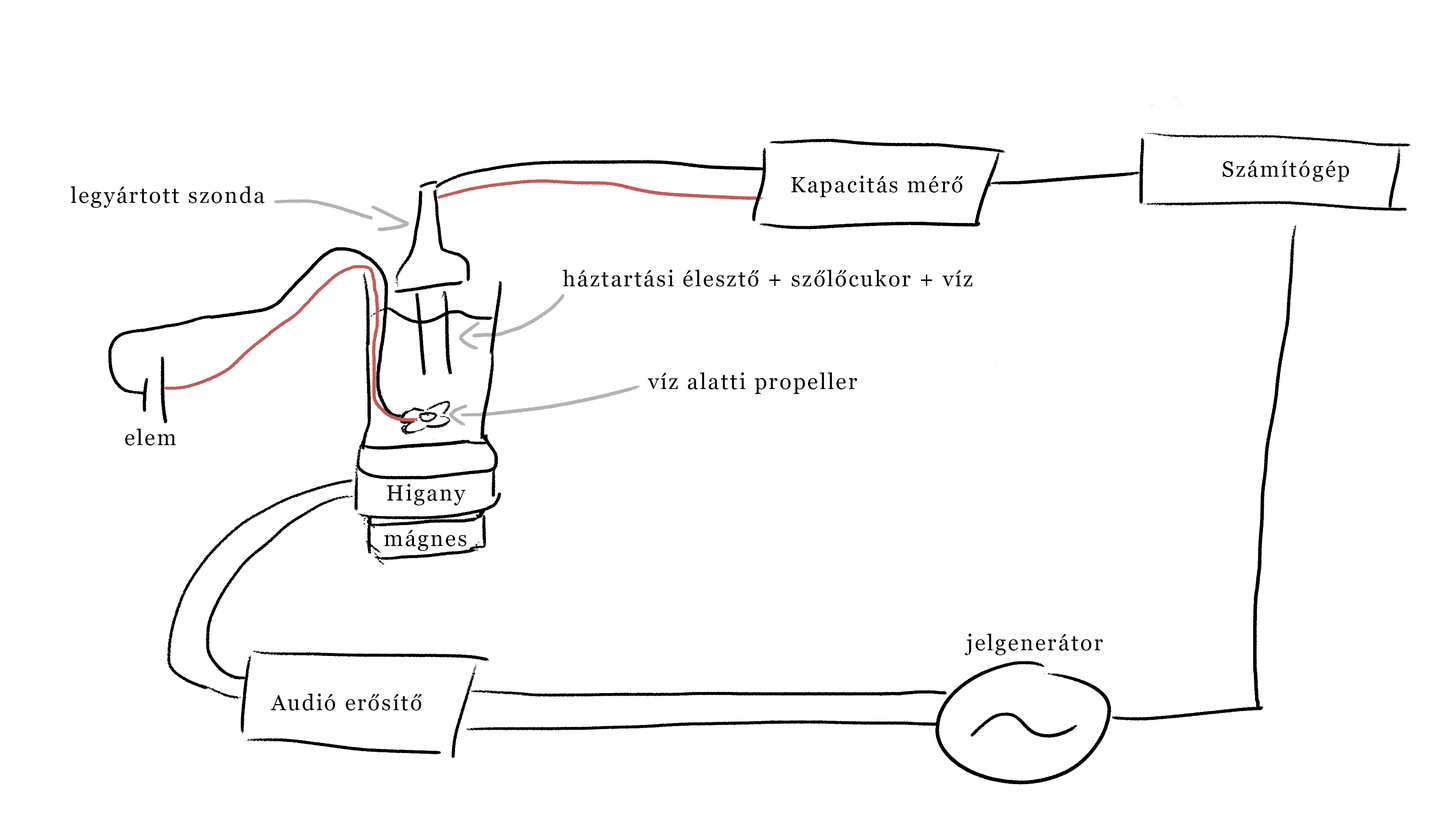
<style>
.page{position:relative;width:1456px;height:819px;background:#ffffff}
.page>*{position:absolute;margin:0}
.t1{font:22.1px "Georgia";letter-spacing:0.075em;color:#000000}
</style>
<div class="page">
<p class="t1" style="left:1222px;top:160px;width:127px;height:22px">Számítógép</p>
<p class="t1" style="left:791px;top:176px;width:172px;height:21px">Kapacitás mérő</p>
<p class="t1" style="left:71px;top:186px;width:194px;height:22px">legyártott szonda</p>
<p class="t1" style="left:563px;top:270px;width:410px;height:17px">háztartási élesztő + szőlőcukor + víz</p>
<p class="t1" style="left:648px;top:372px;width:209px;height:22px">víz alatti propeller</p>
<p class="t1" style="left:125px;top:428px;width:51px;height:18px">elem</p>
<p class="t1" style="left:387px;top:484px;width:79px;height:21px">Higany</p>
<p class="t1" style="left:384px;top:530px;width:82px;height:21px">mágnes</p>
<p class="t1" style="left:965px;top:634px;width:138px;height:21px">jelgenerátor</p>
<p class="t1" style="left:270px;top:693px;width:152px;height:18px">Audió erősítő</p>
</div>
